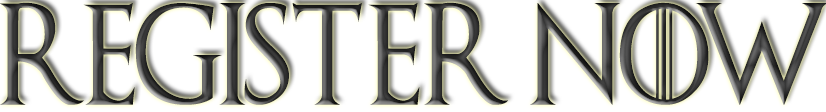
<style>
.page{position:relative;width:826px;height:112px;background:#ffffff}
.page>*{position:absolute;margin:0}
.t1{font:101.7px "GameofThrones";scale:0.87 1}
</style>
<div class="page">
<p class="t1" style="left:0px;top:2px;width:828px;height:103px">rEGISTER NOW</p>
</div>
